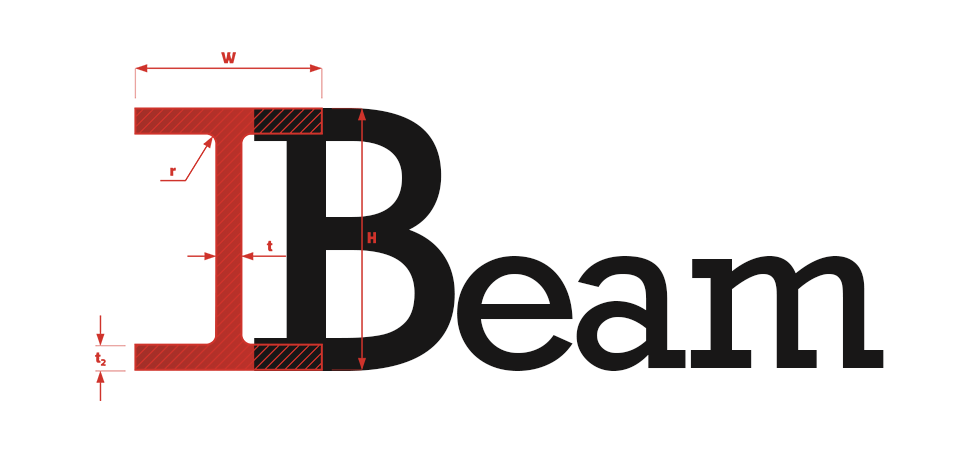
<style>
.page{position:relative;width:958px;height:452px;background:#ffffff}
.page>*{position:absolute;margin:0}
.t1{font:357.4px "RockwellNova";letter-spacing:0.01em;color:#181717}
.t2{font:213px "RockwellNova";letter-spacing:0.01em;color:#181717}
</style>
<div class="page">
<p class="t1" style="left:254px;top:108px;width:201px;height:263px">B</p>
<p class="t2" style="left:457px;top:256px;width:116px;height:115px">e</p>
<p class="t2" style="left:576px;top:256px;width:110px;height:115px">a</p>
<p class="t2" style="left:690px;top:256px;width:194px;height:112px">m</p>
</div>
